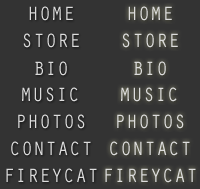
<style>
.page{position:relative;width:200px;height:189px;background:#333333}
.page>*{position:absolute;margin:0}
.t1{font:20px "OratorStd";color:#dcdcdc;text-transform:uppercase}
</style>
<div class="page">
<p class="t1" style="left:29px;top:6px;width:44px;height:15px">HOME</p>
<p class="t1" style="left:128px;top:6px;width:44px;height:15px">HOME</p>
<p class="t1" style="left:23px;top:33px;width:56px;height:15px">store</p>
<p class="t1" style="left:122px;top:33px;width:56px;height:15px">store</p>
<p class="t1" style="left:35px;top:61px;width:32px;height:15px">bio</p>
<p class="t1" style="left:134px;top:61px;width:32px;height:15px">bio</p>
<p class="t1" style="left:22px;top:87px;width:56px;height:15px">Music</p>
<p class="t1" style="left:121px;top:87px;width:56px;height:15px">Music</p>
<p class="t1" style="left:18px;top:114px;width:67px;height:15px">photos</p>
<p class="t1" style="left:117px;top:114px;width:67px;height:15px">photos</p>
<p class="t1" style="left:11px;top:141px;width:80px;height:15px">contact</p>
<p class="t1" style="left:110px;top:141px;width:80px;height:15px">contact</p>
<p class="t1" style="left:6px;top:168px;width:91px;height:15px">FireyCat</p>
<p class="t1" style="left:105px;top:168px;width:91px;height:15px">FireyCat</p>
</div>
